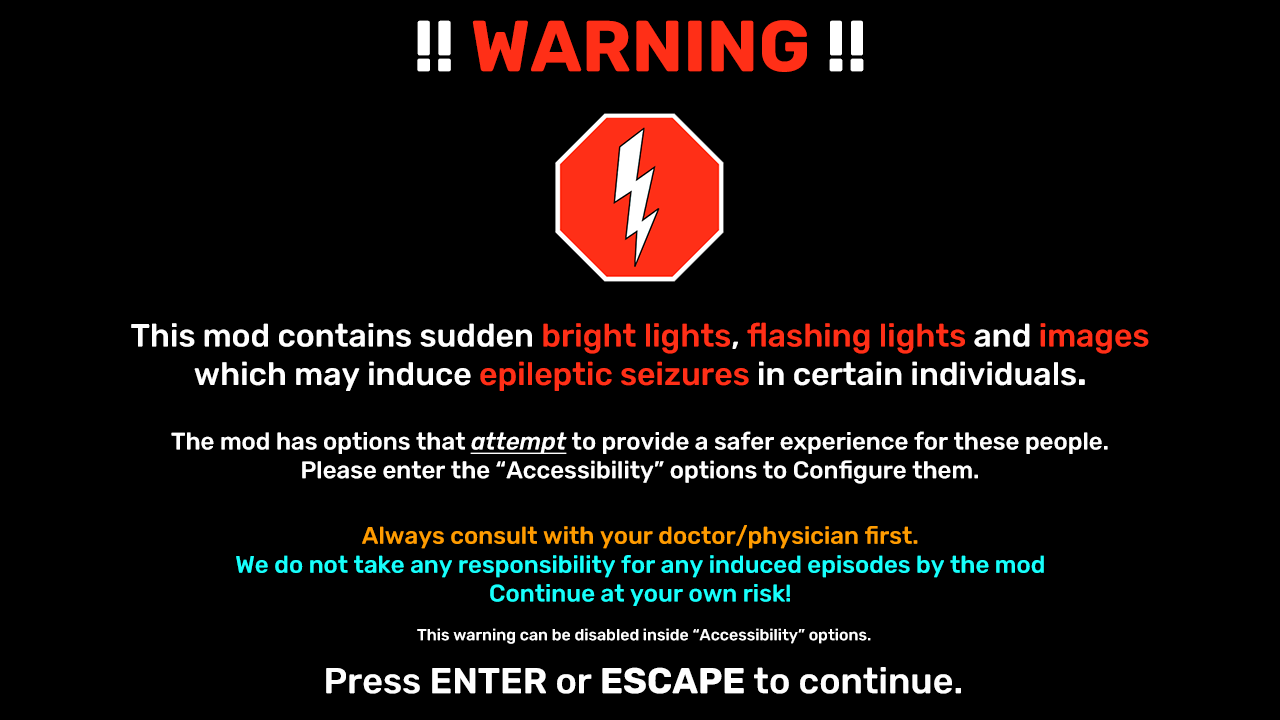
<style>
.page{position:relative;width:1280px;height:720px;background:#000000}
.page>*{position:absolute;margin:0}
.t1{font:72px "Rubik-Bold";color:#ff2f17}
.t2{font:72px "Rubik-Bold";color:#ffffff}
.t3{font:32px "Rubik-Medium";color:#fefefe}
.t4{font:32px "Rubik-Medium";color:#ff2f17}
.t5{font:32px "Rubik-Bold";color:#fefefe}
.t6{font:24px "Rubik-Medium";color:#fefefe}
.t7{font:24px "Rubik-MediumItalic";color:#fefefe;text-decoration:underline}
.t8{font:24px "Rubik-Medium";color:#17fffc}
.t9{font:24px "Rubik-Medium";color:#ff9c00}
.t10{font:16px "Rubik-Medium";color:#fefefe}
.t11{font:36px "Rubik-Medium";color:#fefefe}
.t12{font:36px "Rubik-SemiBold";color:#fefefe}
.t13{font:36px "Rubik-Bold";color:#fefefe}
</style>
<div class="page">
<p class="t1" style="left:417px;top:20px;width:447px;height:52px"><span class="t2">!!</span> WARNING <span class="t2">!!</span></p>
<p class="t3" style="left:131px;top:322px;width:1018px;height:69px;text-align:center">This mod contains sudden <span class="t4">bright lights</span>, <span class="t4">flashing lights</span> and <span class="t4">images<br></span>which may induce <span class="t4">epileptic seizures</span> in certain individuals<span class="t5">.</span></p>
<p class="t6" style="left:171px;top:431px;width:937px;height:53px;text-align:center">The mod has options that <span class="t7">attempt</span> to provide a safer experience for these people.<br>Please enter the “Accessibility” options to Configure them.</p>
<p class="t8" style="left:236px;top:525px;width:808px;height:81px;text-align:center"><span class="t9">Always consult with your doctor/physician first.<br></span>We do not take any responsibility for any induced episodes by the mod<br>Continue at your own risk!</p>
<p class="t10" style="left:417px;top:628px;width:454px;height:16px">This warning can be disabled inside “Accessibility” options.</p>
<p class="t11" style="left:326px;top:667px;width:635px;height:27px">Press <span class="t12">ENTER</span> or <span class="t13">ESCAPE</span> to continue.</p>
</div>
